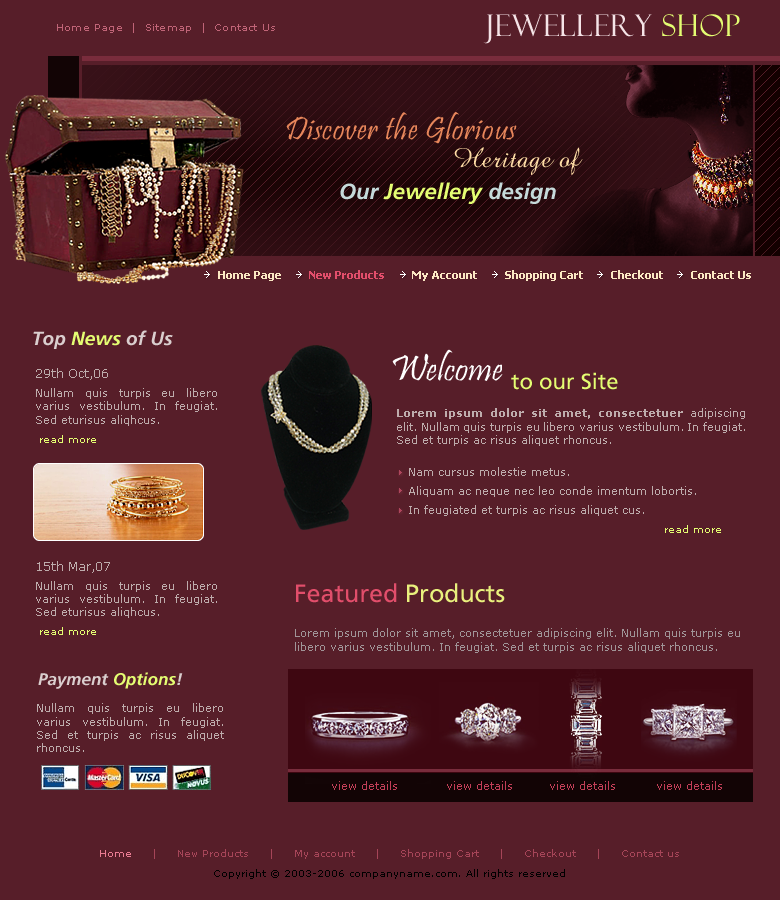
<style>
.page{position:relative;width:780px;height:900px;background:#571e29}
.page>*{position:absolute;margin:0}
.t1{font:30px "FelixTitlingMT";letter-spacing:0.02em;color:#f5e4e7}
.t2{font:30px "FelixTitlingMT";letter-spacing:0.02em;color:#e4fd72}
.t3{font:10px "Verdana";letter-spacing:0.02em;color:#c06477}
.t4{font:33px "Pristina-Regular";letter-spacing:0.02em;color:#e8875b}
.t5{font:28px "AmazoneBT-Regular";letter-spacing:0.02em;color:#fedda6}
.t6{font:22px "AGForeignerLightBoldItalicBold";color:#e4fd72}
.t7{font:22px "AGForeignerLightBoldItalicBold";color:#c5dada}
.t8{font:11px "Tahoma-Bold";color:#fbe8c3}
.t9{font:11px "Tahoma-Bold";color:#e24e6b}
.t10{font:19px "AGForeignerLightBoldItalicBold";color:#dacece}
.t11{font:19px "AGForeignerLightBoldItalicBold";color:#e4fd72}
.t12{font:37px "Pristina-Regular";color:#ffffff}
.t13{font:11px "Verdana";color:#beacac}
.t14{font:12px/19px "Verdana";color:#beacac}
.t15{font:11px/19px "Verdana";color:#beacac}
.t16{font:10px/19px "Verdana";color:#e4fd72}
.t17{font:22px "AGForeignerRomanMedium";color:#e4fd72}
.t18{font:11px "Verdana-Bold";color:#beacac}
.t19{font:25px "AGForeignerRomanMedium";color:#e24e6b}
.t20{font:25px "AGForeignerRomanMedium";color:#e9f07d}
.t21{font:11px "Verdana";color:#a09497}
.t22{font:17px "AGForeignerLightBoldItalicBold";color:#dacece}
.t23{font:17px "AGForeignerLightBoldItalicBold";color:#e4fd72}
.t24{font:11px "Verdana";color:#c13e57}
</style>
<div class="page">
<p class="t1" style="left:483px;top:14px;width:257px;height:30px">Jewellery <span class="t2">Shop</span></p>
<p class="t3" style="left:57px;top:23px;width:218px;height:10px">Home Page  |  Sitemap  |  Contact Us</p>
<p class="t4" style="left:286px;top:112px;width:231px;height:32px">Discover the Glorious</p>
<p class="t5" style="left:454px;top:147px;width:129px;height:28px">Heritage of</p>
<p class="t6" style="left:340px;top:182px;width:216px;height:22px"><span class="t7">Our</span> Jewellery<span class="t7"> design</span></p>
<p class="t8" style="left:218px;top:270px;width:533px;height:11px">Home Page        <span class="t9"> New Products</span>         My Account         Shopping Cart         Checkout         Contact Us</p>
<p class="t10" style="left:33px;top:330px;width:140px;height:19px">Top <span class="t11">News</span> of Us</p>
<p class="t12" style="left:392px;top:349px;width:111px;height:32px">Welcome</p>
<p class="t13" style="left:36px;top:368px;width:181px;height:267px;text-align:justify"><span class="t14">29th Oct,06<br></span><span class="t15">Nullam quis turpis eu libero </span>varius vestibulum. In feugiat. Sed eturisus aliqhcus.<br> <span class="t16">read more<br><br><br><br><br><br><br></span><span class="t14">15th Mar,07<br></span><span class="t15">Nullam quis turpis eu libero </span>varius vestibulum. In feugiat. Sed eturisus aliqhcus.<br> <span class="t16">read more</span></p>
<p class="t17" style="left:511px;top:372px;width:107px;height:18px">to our Site</p>
<p class="t15" style="left:397px;top:408px;width:348px;height:125px;text-align:justify"><span class="t18">Lorem ipsum dolor sit amet, consectetuer</span><span class="t13"> adipiscing elit. Nullam quis turpis eu libero varius vestibulum. In feugiat. Sed et turpis ac risus aliquet rhoncus. <br><br>   </span>Nam cursus molestie metus. <br>   Aliquam ac neque nec leo conde imentum lobortis.<br>   In feugiated et turpis ac risus aliquet cus.<br>                                                                   <span class="t16">read more</span></p>
<p class="t19" style="left:296px;top:583px;width:209px;height:20px">Featured <span class="t20">Products</span></p>
<p class="t21" style="left:295px;top:628px;width:445px;height:25px">Lorem ipsum dolor sit amet, consectetuer adipiscing elit. Nullam quis turpis eu libero varius vestibulum. In feugiat. Sed et turpis ac risus aliquet rhoncus.</p>
<p class="t22" style="left:38px;top:672px;width:145px;height:17px">Payment <span class="t23">Options</span>!</p>
<p class="t13" style="left:37px;top:703px;width:187px;height:49px;text-align:justify">Nullam quis turpis eu libero varius vestibulum. In feugiat. Sed et turpis ac risus aliquet rhoncus.</p>
<p class="t24" style="left:332px;top:781px;width:390px;height:9px">view details            view details         view details          view details</p>
</div>
